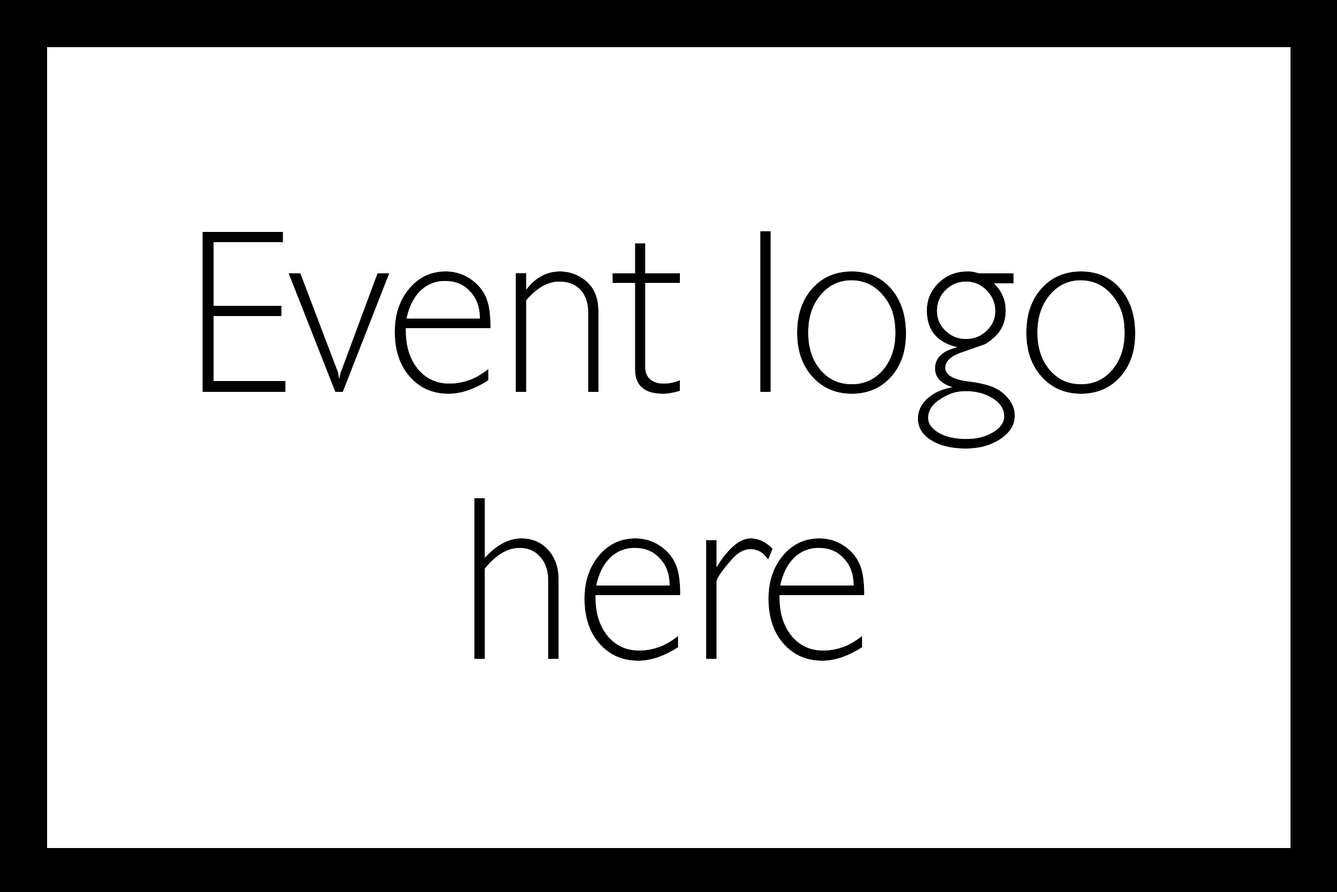
<style>
.page{position:relative;width:1337px;height:892px;background:#ffffff}
.page>*{position:absolute;margin:0}
.t1{font:222.3px "ChantillySerialXlight";color:#000000}
</style>
<div class="page">
<p class="t1" style="left:203px;top:231px;width:933px;height:429px;text-align:center">Event logo<br>here</p>
</div>
